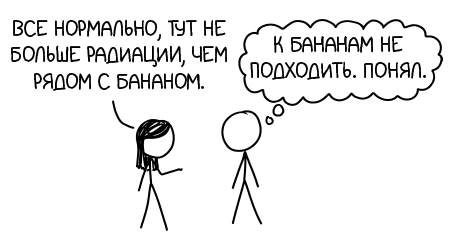
<style>
.page{position:relative;width:455px;height:243px;background:#ffffff}
.page>*{position:absolute;margin:0}
.t1{font:22.2px "SarcasmInk";color:#000000}
</style>
<div class="page">
<p class="t1" style="left:11px;top:19px;width:216px;height:72px;text-align:center">Все нормально, тут не больше радиации, чем рядом с бананом.</p>
<p class="t1" style="left:250px;top:36px;width:176px;height:44px;text-align:center">К бананам не подходить. Понял.</p>
</div>
